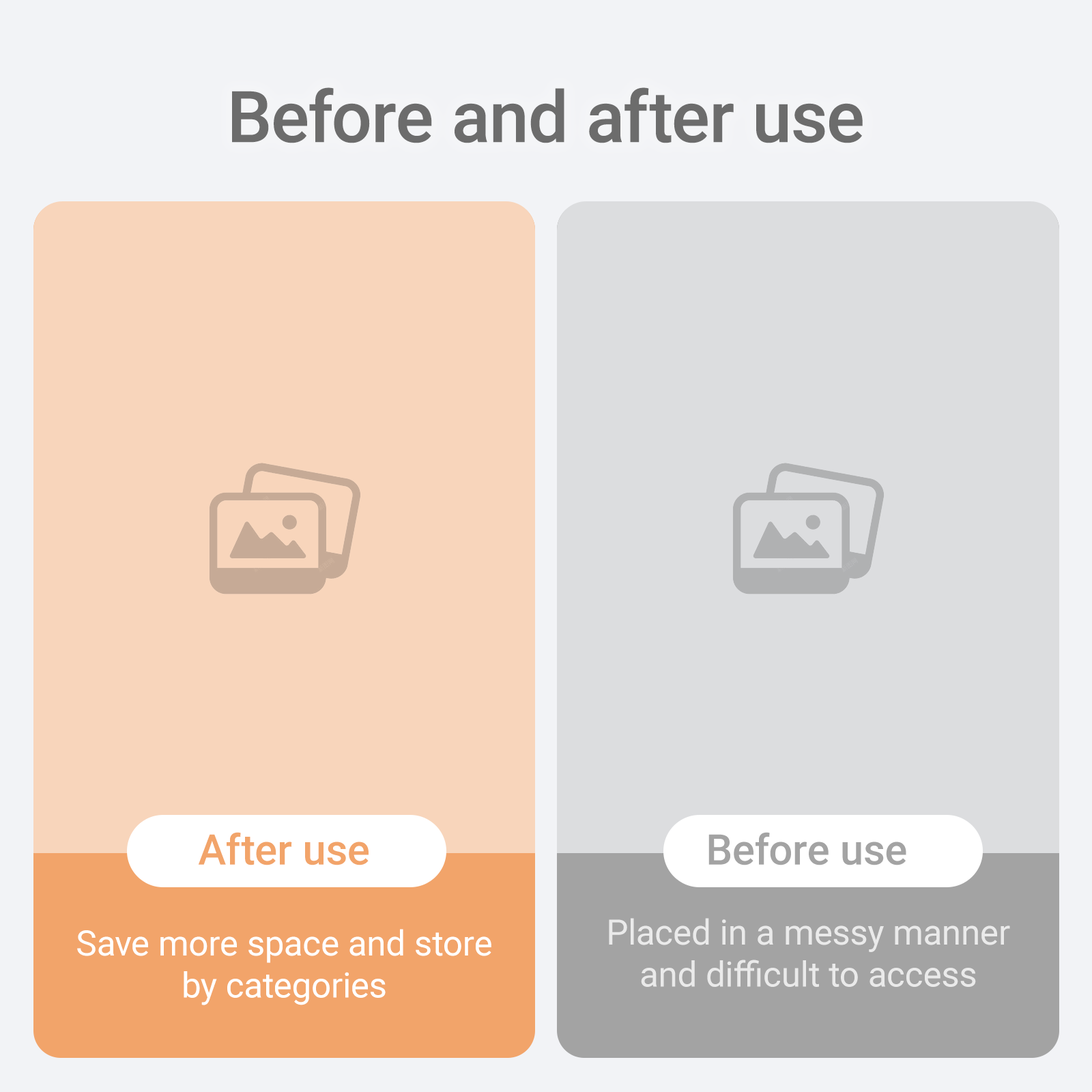
<style>
.page{position:relative;width:1092px;height:1092px;background:#f2f3f6}
.page>*{position:absolute;margin:0}
.t1{font:71.3px "Roboto-Medium";color:#6c6c6c}
.t2{font:42.2px "Roboto-Medium";color:#f2a46a}
.t3{font:42.2px "Roboto-Medium";color:#a3a3a3}
.t4{font:34.9px "Roboto-Regular";color:#ffffff}
</style>
<div class="page">
<p class="t1" style="left:232px;top:87px;width:631px;height:56px">Before and after use</p>
<p class="t2" style="left:198px;top:832px;width:171px;height:33px">After use</p>
<p class="t3" style="left:708px;top:832px;width:198px;height:33px">Before use</p>
<p class="t4" style="left:609px;top:918px;width:401px;height:69px;text-align:center;opacity:0.75">Placed in a messy manner and difficult to access</p>
<p class="t4" style="left:77px;top:929px;width:414px;height:76px;text-align:center">Save more space and store by categories</p>
</div>
